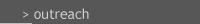
<style>
.page{position:relative;width:200px;height:24px;background:#575758}
.page>*{position:absolute;margin:0}
.t1{font:14px "TrebuchetMS";color:#cccccc}
</style>
<div class="page">
<p class="t1" style="left:23px;top:8px;width:66px;height:11px">&gt; outreach</p>
</div>
